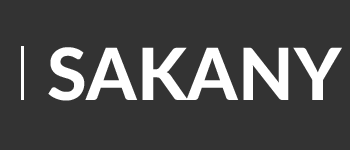
<style>
.page{position:relative;width:350px;height:150px;background:#333333}
.page>*{position:absolute;margin:0}
.t1{font:72px "Lato-Heavy";color:#ffffff}
</style>
<div class="page">
<p class="t1" style="left:48px;top:47px;width:294px;height:54px">SAKANY</p>
</div>
